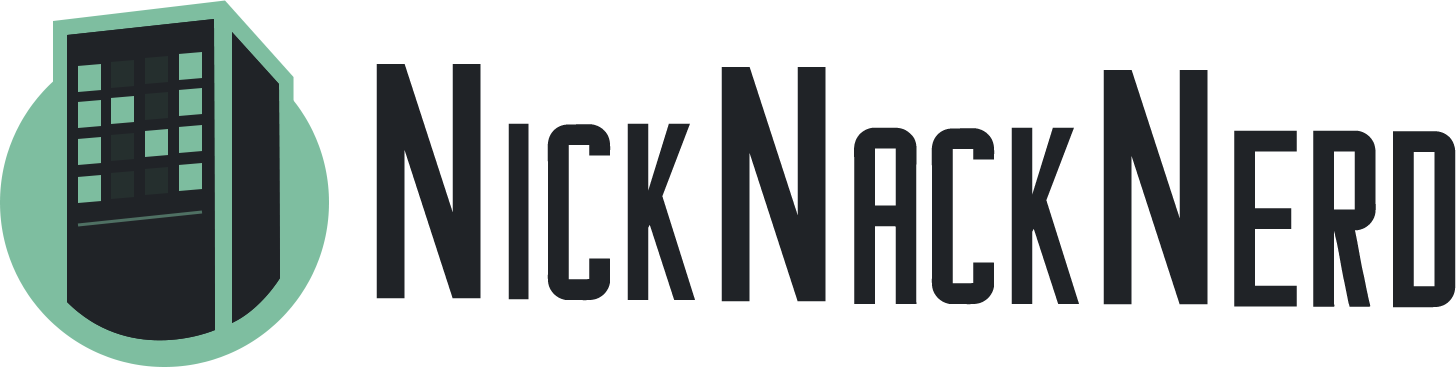
<style>
.page{position:relative;width:1456px;height:367px;background:#ffffff}
.page>*{position:absolute;margin:0}
.t1{font:336.8px "Cataclysmo";color:#202327}
.t2{font:252.6px "Cataclysmo";color:#202327}
</style>
<div class="page">
<p class="t1" style="left:376px;top:64px;width:105px;height:235px">N</p>
<p class="t1" style="left:721px;top:67px;width:105px;height:235px">N</p>
<p class="t1" style="left:1103px;top:70px;width:105px;height:235px">N</p>
<p class="t2" style="left:508px;top:123px;width:187px;height:178px">ick</p>
<p class="t2" style="left:854px;top:127px;width:225px;height:178px">ack</p>
<p class="t2" style="left:1234px;top:130px;width:222px;height:178px">erd</p>
</div>
